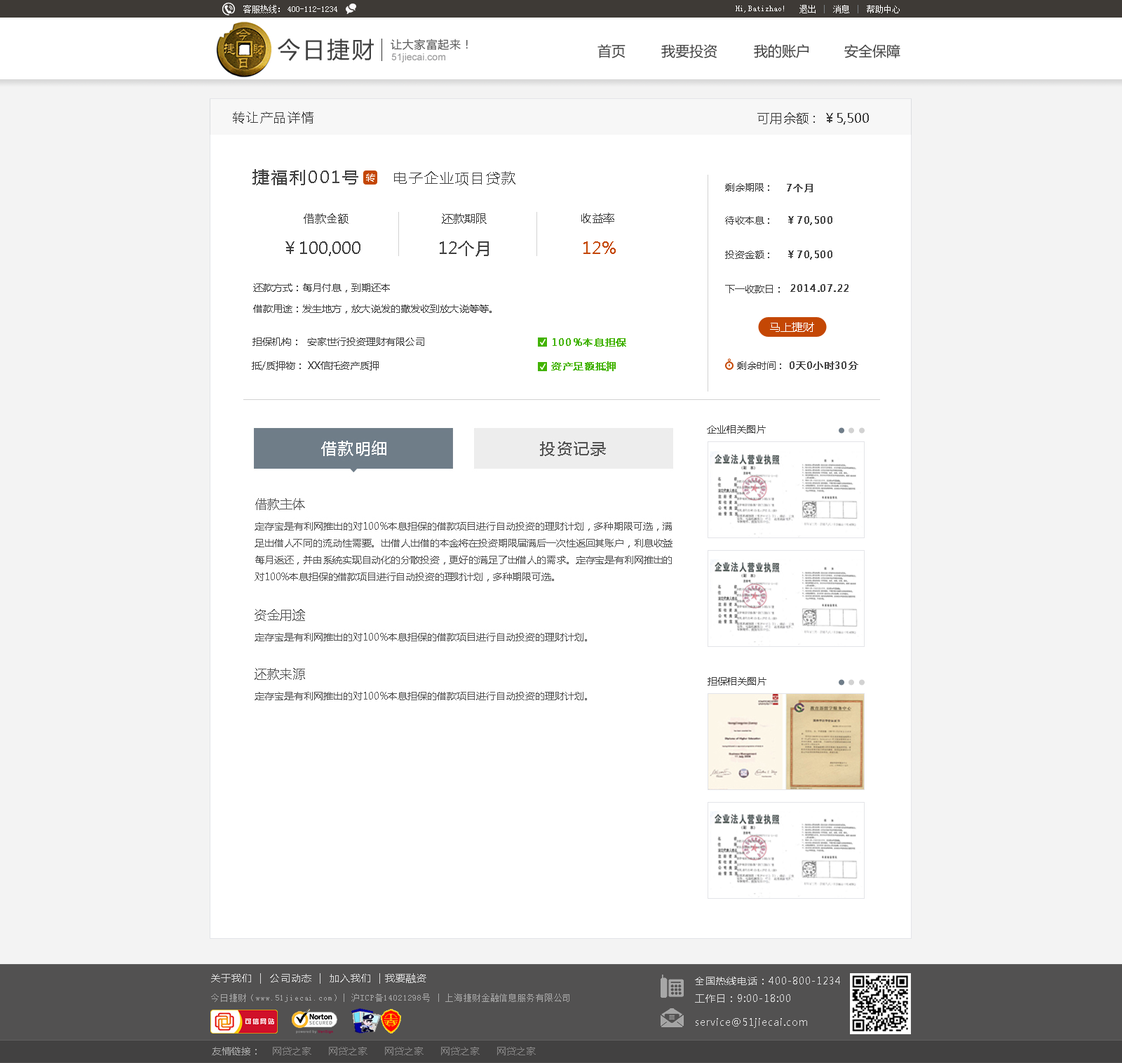
<style>
.page{position:relative;width:1122px;height:1063px;background:#ffffff}
.page>*{position:absolute;margin:0}
.t1{font:8.4px "SimSun";color:#ffffff}
.t2{font:22.4px "MicrosoftYaHei";letter-spacing:0.1em;color:#3f3f3f}
.t3{font:11.2px "MicrosoftYaHei";letter-spacing:0.05em;color:#575757}
.t4{font:9.8px "ArialMT";color:#969697}
.t5{font:14px "MicrosoftYaHei";color:#414141}
.t6{font:12.6px "MicrosoftYaHei";letter-spacing:0.1em;color:#3f3f3f}
.t7{font:12.6px "MicrosoftYaHei";color:#3f3f3f}
.t8{font:16.8px "MicrosoftYaHei";letter-spacing:0.1em;color:#414141}
.t9{font:9.8px "MicrosoftYaHei";letter-spacing:0.1em;color:#ffffff}
.t10{font:14px "MicrosoftYaHei";letter-spacing:0.1em;color:#414141}
.t11{font:9.8px "MicrosoftYaHei";color:#414141}
.t12{font:9.8px "MicrosoftYaHei";color:#414141;font-weight:bold}
.t13{font:11.2px "MicrosoftYaHei";color:#414141}
.t14{font:16.8px "MicrosoftYaHei";color:#414141}
.t15{font:16.8px "MicrosoftYaHei";color:#c44703}
.t16{font:9.8px/21px "MicrosoftYaHei";color:#414141}
.t17{font:11.2px "MicrosoftYaHei";color:#ffffff}
.t18{font:9.8px "MicrosoftYaHei";letter-spacing:0.04em;color:#42b302;font-weight:bold}
.t19{font:9.8px "MicrosoftYaHei";letter-spacing:0.07em;color:#dbdbdb}
.t20{font:9.8px "MicrosoftYaHei";letter-spacing:0.07em;color:#dadada}
.t21{font:8.4px "SimSun";letter-spacing:0.07em;color:#a7a7a7}
.t22{font:9.8px "MicrosoftYaHei";color:#858484}
.t23{font:9.8px "MicrosoftYaHei";color:#a7a7a7}
</style>
<div class="page">
<p class="t1" style="left:243px;top:5px;width:37px;height:8px">客服热线：</p>
<p class="t1" style="left:736px;top:6px;width:48px;height:7px">Hi,Batizhao!</p>
<p class="t1" style="left:800px;top:5px;width:100px;height:8px">退出    消息    帮助中心</p>
<p class="t1" style="left:288px;top:6px;width:49px;height:6px">400-112-1234</p>
<p class="t2" style="left:278px;top:39px;width:96px;height:22px">今日捷财</p>
<p class="t3" style="left:391px;top:39px;width:77px;height:11px">让大家富起来！</p>
<p class="t4" style="left:391px;top:53px;width:54px;height:9px">51jiecai.com</p>
<p class="t5" style="left:598px;top:44px;width:28px;height:14px">首页</p>
<p class="t5" style="left:661px;top:44px;width:57px;height:14px">我要投资</p>
<p class="t5" style="left:754px;top:44px;width:55px;height:14px">我的账户</p>
<p class="t5" style="left:844px;top:44px;width:57px;height:14px">安全保障</p>
<p class="t6" style="left:233px;top:112px;width:81px;height:11px">转让产品详情</p>
<p class="t7" style="left:757px;top:112px;width:112px;height:13px">可用余额 :  ￥5,500</p>
<p class="t8" style="left:252px;top:169px;width:106px;height:16px">捷福利001号</p>
<p class="t9" style="left:366px;top:173px;width:9px;height:9px">转</p>
<p class="t10" style="left:394px;top:171px;width:122px;height:14px">电子企业项目贷款</p>
<p class="t11" style="left:725px;top:183px;width:44px;height:8px">剩余期限 :</p>
<p class="t12" style="left:787px;top:184px;width:26px;height:8px">7个月</p>
<p class="t13" style="left:304px;top:213px;width:45px;height:11px">借款金额</p>
<p class="t13" style="left:442px;top:213px;width:45px;height:11px">还款期限</p>
<p class="t13" style="left:581px;top:213px;width:33px;height:11px">收益率</p>
<p class="t11" style="left:725px;top:216px;width:44px;height:8px">待收本息 :</p>
<p class="t12" style="left:788px;top:216px;width:45px;height:9px">￥70,500</p>
<p class="t14" style="left:285px;top:241px;width:76px;height:15px">￥100,000</p>
<p class="t14" style="left:440px;top:241px;width:49px;height:16px">12个月</p>
<p class="t15" style="left:584px;top:241px;width:32px;height:13px">12%</p>
<p class="t11" style="left:725px;top:250px;width:44px;height:9px">投资金额 :</p>
<p class="t12" style="left:788px;top:250px;width:45px;height:10px">￥70,500</p>
<p class="t16" style="left:253px;top:283px;width:239px;height:31px;text-align:justify">还款方式：每月付息，到期还本<br>借款用途：发生地方，放大说发的撒发收到放大说等等。</p>
<p class="t11" style="left:725px;top:285px;width:55px;height:8px">下一收款日：</p>
<p class="t12" style="left:790px;top:284px;width:59px;height:8px">2014.07.22</p>
<p class="t17" style="left:770px;top:322px;width:44px;height:10px">马上捷财</p>
<p class="t11" style="left:252px;top:337px;width:45px;height:9px">担保机构：</p>
<p class="t11" style="left:307px;top:337px;width:117px;height:9px">安家世行投资理财有限公司</p>
<p class="t18" style="left:553px;top:338px;width:73px;height:8px">100%本息担保</p>
<p class="t11" style="left:252px;top:361px;width:49px;height:9px">抵/质押物：</p>
<p class="t11" style="left:308px;top:361px;width:71px;height:9px">XX信托资产质押</p>
<p class="t18" style="left:551px;top:361px;width:65px;height:10px">资产足额抵押</p>
<p class="t11" style="left:737px;top:361px;width:44px;height:9px">剩余时间 :</p>
<p class="t12" style="left:790px;top:361px;width:68px;height:9px">0天0小时30分</p>
<p class="t11" style="left:707px;top:425px;width:59px;height:8px">企业相关图片</p>
<p class="t11" style="left:708px;top:677px;width:59px;height:8px">担保相关图片</p>
<p class="t19" style="left:211px;top:973px;width:215px;height:10px">关于我们  |  公司动态  |  加入我们  | 我要融资</p>
<p class="t20" style="left:695px;top:976px;width:145px;height:26px">全国热线电话：400-800-1234<br>工作日：9:00-18:00</p>
<p class="t21" style="left:211px;top:993px;width:359px;height:9px">今日捷财（www.51jiecai.com）| 沪ICP备14021298号 | 上海捷财金融信息服务有限公司</p>
<p class="t20" style="left:696px;top:1018px;width:111px;height:10px">service@51jiecai.com</p>
<p class="t22" style="left:212px;top:1046px;width:324px;height:9px"><span class="t23">友情链接：</span>    网贷之家      网贷之家      网贷之家      网贷之家      网贷之家</p>
</div>
